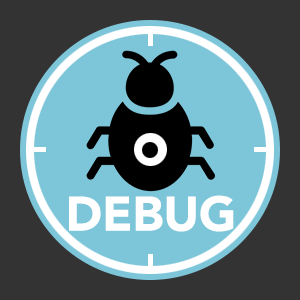
<style>
.page{position:relative;width:300px;height:300px;background:#333333}
.page>*{position:absolute;margin:0}
.t1{font:48px "Avenir-Black";color:#ffffff}
</style>
<div class="page">
<p class="t1" style="left:69px;top:195px;width:165px;height:37px">DEBUG</p>
</div>
